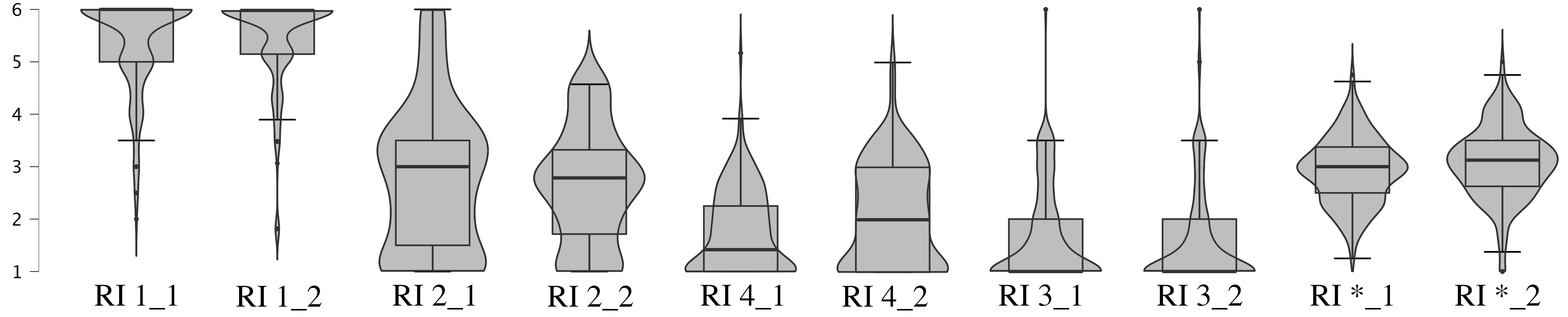
<style>
.page{position:relative;width:1568px;height:317px;background:#ffffff}
.page>*{position:absolute;margin:0}
.t1{font:31.4px "Times-Roman";color:#000000}
</style>
<div class="page">
<p class="t1" style="left:94px;top:285px;width:83px;height:25px">RI 1_1</p>
<p class="t1" style="left:236px;top:286px;width:86px;height:25px">RI 1_2</p>
<p class="t1" style="left:392px;top:285px;width:83px;height:25px">RI 2_1</p>
<p class="t1" style="left:547px;top:286px;width:86px;height:25px">RI 2_2</p>
<p class="t1" style="left:700px;top:285px;width:83px;height:25px">RI 4_1</p>
<p class="t1" style="left:842px;top:286px;width:86px;height:25px">RI 4_2</p>
<p class="t1" style="left:998px;top:284px;width:83px;height:26px">RI 3_1</p>
<p class="t1" style="left:1157px;top:284px;width:86px;height:26px">RI 3_2</p>
<p class="t1" style="left:1310px;top:284px;width:83px;height:26px">RI *_1</p>
<p class="t1" style="left:1455px;top:284px;width:86px;height:26px">RI *_2</p>
</div>
